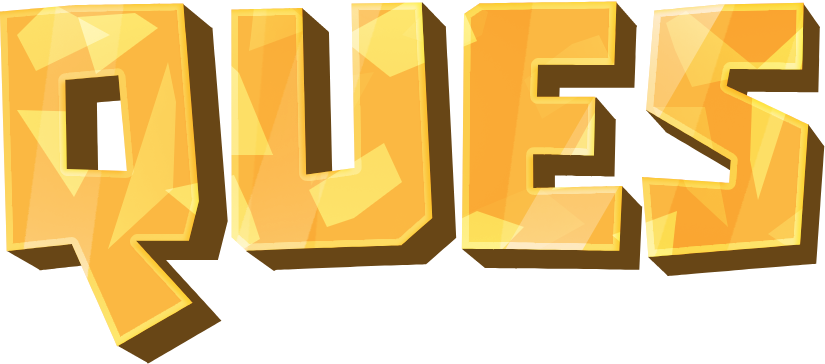
<style>
.page{position:relative;width:825px;height:364px;background:#ffffff}
.page>*{position:absolute;margin:0}
.t1{font:399.6px "Troika"}
</style>
<div class="page">
<p class="t1" style="left:0px;top:1px;width:809px;height:346px">QUES</p>
</div>
